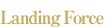
<style>
.page{position:relative;width:105px;height:27px;background:#ffffff}
.page>*{position:absolute;margin:0}
.t1{font:18px "RyuminPro-ExBold";letter-spacing:-0.08em;color:#c4a956;scale:0.97 1}
</style>
<div class="page">
<p class="t1" style="left:0px;top:10px;width:104px;height:17px">Landing Force</p>
</div>
